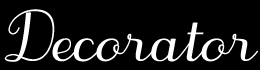
<style>
.page{position:relative;width:260px;height:70px;background:#000000}
.page>*{position:absolute;margin:0}
.t1{font:48px "JBCursive-V3-Medium";color:#ffffff;font-style:italic}
</style>
<div class="page">
<p class="t1" style="left:4px;top:9px;width:255px;height:53px">Decorator</p>
</div>
